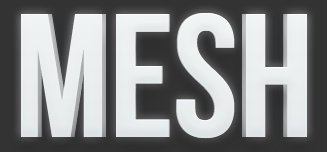
<style>
.page{position:relative;width:327px;height:152px}
.page>*{position:absolute;margin:0}
.t1{font:175.3px "BebasNeue";color:#eff2f3;text-transform:uppercase}
.t2{font:175.3px "BebasNeue";letter-spacing:-0.015em;color:#e9edef;text-transform:uppercase}
</style>
<div class="page">
<p class="t1" style="left:21px;top:13px;width:286px;height:126px">MESH</p>
<p class="t2" style="left:25px;top:13px;width:278px;height:126px">MESH</p>
</div>
